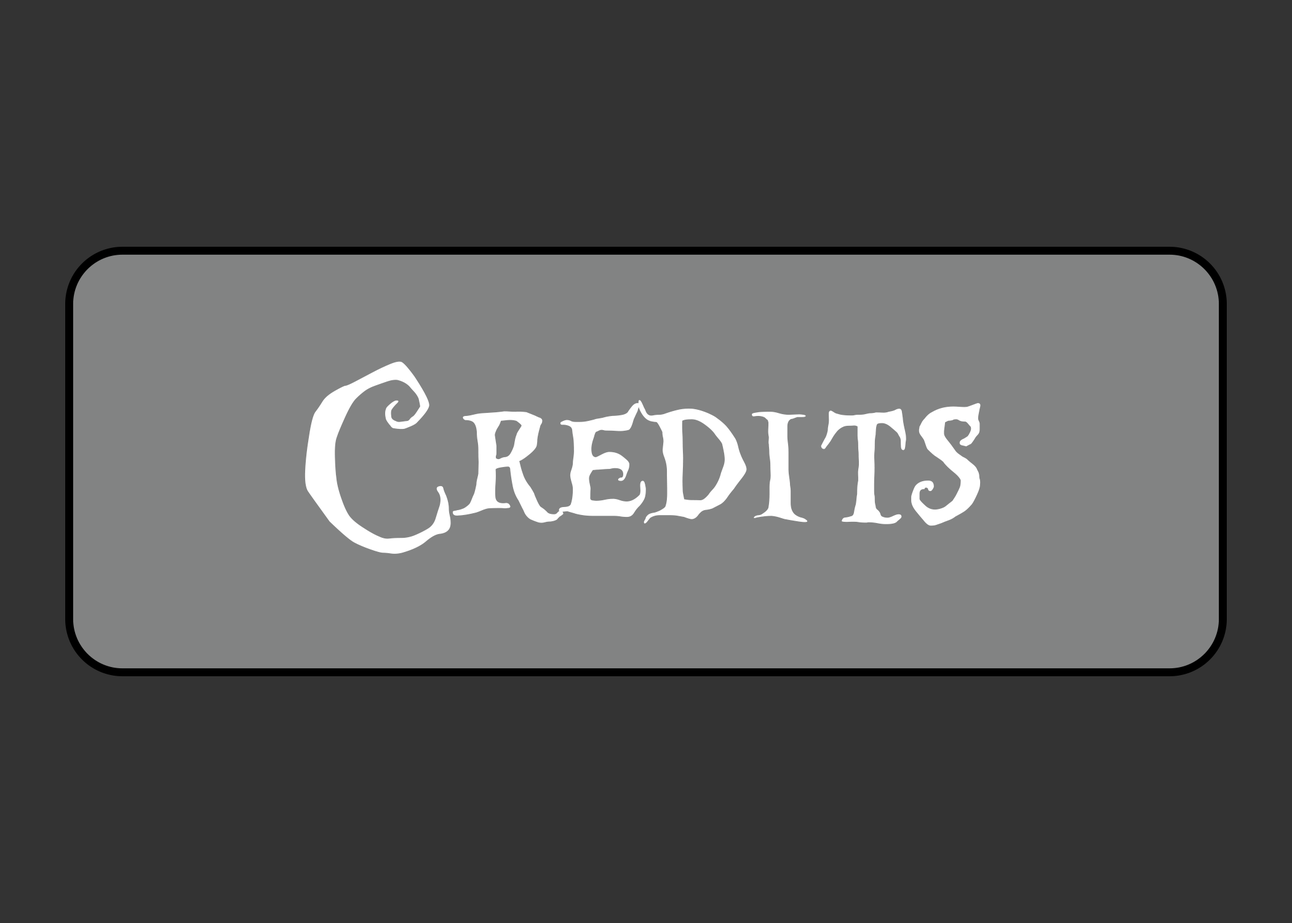
<style>
.page{position:relative;width:1292px;height:923px;background:#333333}
.page>*{position:absolute;margin:0}
.t1{font:282px "AliceinWonderland";color:#ffffff}
</style>
<div class="page">
<p class="t1" style="left:305px;top:361px;width:676px;height:193px">Credits</p>
</div>
